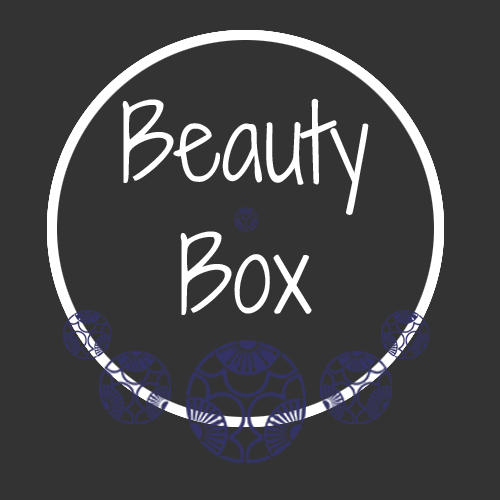
<style>
.page{position:relative;width:500px;height:500px;background:#333333}
.page>*{position:absolute;margin:0}
.t1{font:100px "ShadowsIntoLight";color:#ffffff}
</style>
<div class="page">
<p class="t1" style="left:122px;top:98px;width:247px;height:117px">Beauty</p>
<p class="t1" style="left:180px;top:231px;width:132px;height:84px">Box</p>
</div>
